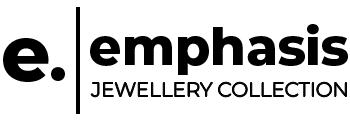
<style>
.page{position:relative;width:350px;height:120px;background:#ffffff}
.page>*{position:absolute;margin:0}
.t1{font:50.8px "Montserrat-ExtraBold";color:#000000}
.t2{font:77.2px "Montserrat-ExtraBold";color:#000000}
.t3{font:61.8px "Montserrat-ExtraBold";color:#000000}
.t4{font:19.9px "Montserrat-Light";color:#000000}
</style>
<div class="page">
<p class="t1" style="left:90px;top:24px;width:258px;height:51px">emphasis</p>
<p class="t2" style="left:3px;top:38px;width:46px;height:44px">e</p>
<p class="t3" style="left:51px;top:67px;width:14px;height:14px">.</p>
<p class="t4" style="left:91px;top:82px;width:256px;height:15px">JEWELLERY COLLECTION</p>
</div>
